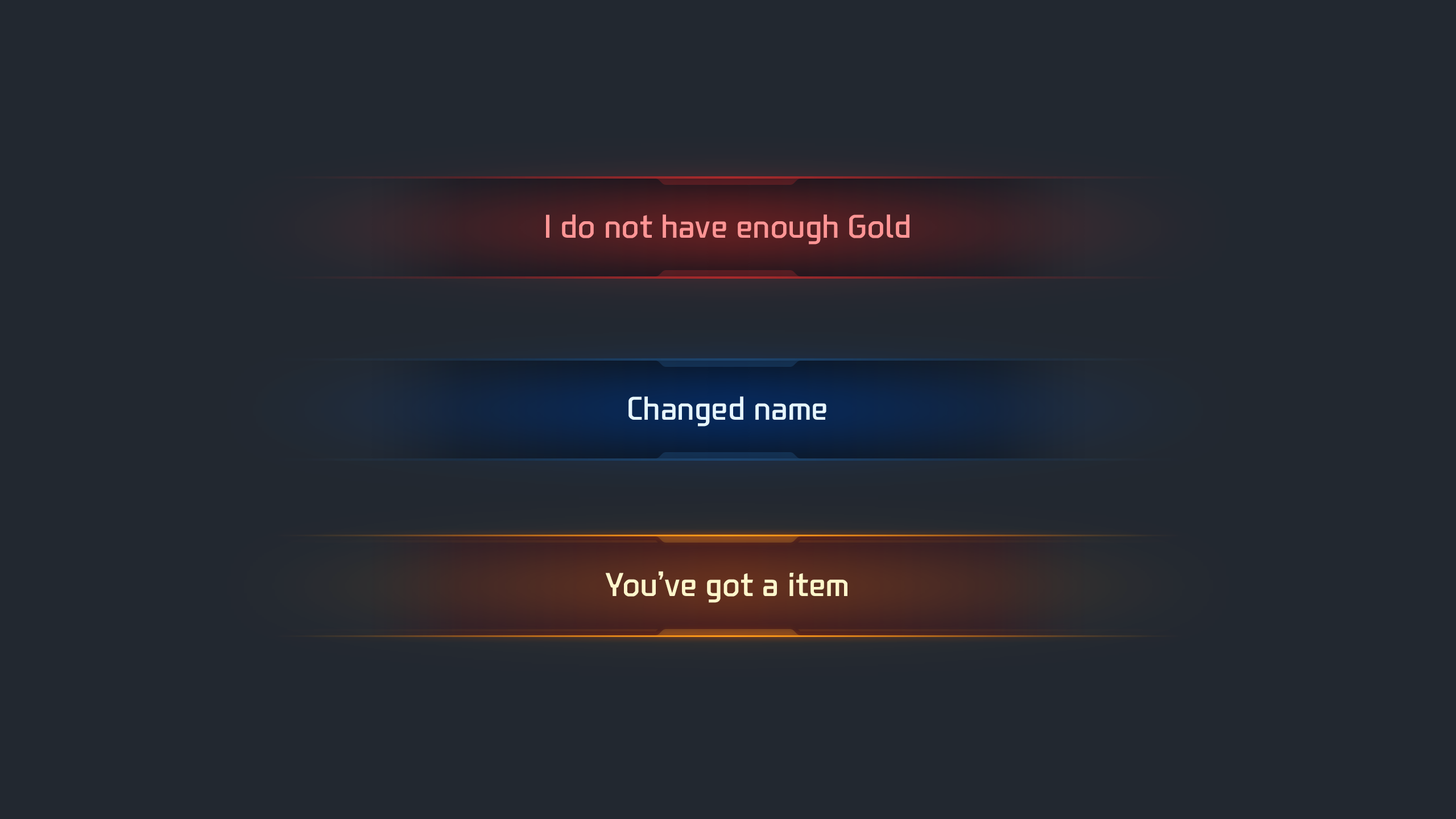
<style>
.page{position:relative;width:1456px;height:819px;background:#222830}
.page>*{position:absolute;margin:0}
.t1{font:31.8px "NEXONFootballGothicL";color:#ff9595}
.t2{font:31.8px "NEXONFootballGothicL";color:#e6f6ff}
.t3{font:31.8px "NEXONFootballGothicL";color:#fff6cb}
</style>
<div class="page">
<p class="t1" style="left:546px;top:214px;width:363px;height:31px">I do not have enough Gold</p>
<p class="t2" style="left:628px;top:396px;width:198px;height:31px">Changed name</p>
<p class="t3" style="left:605px;top:571px;width:242px;height:32px">You’ve got a item</p>
</div>
